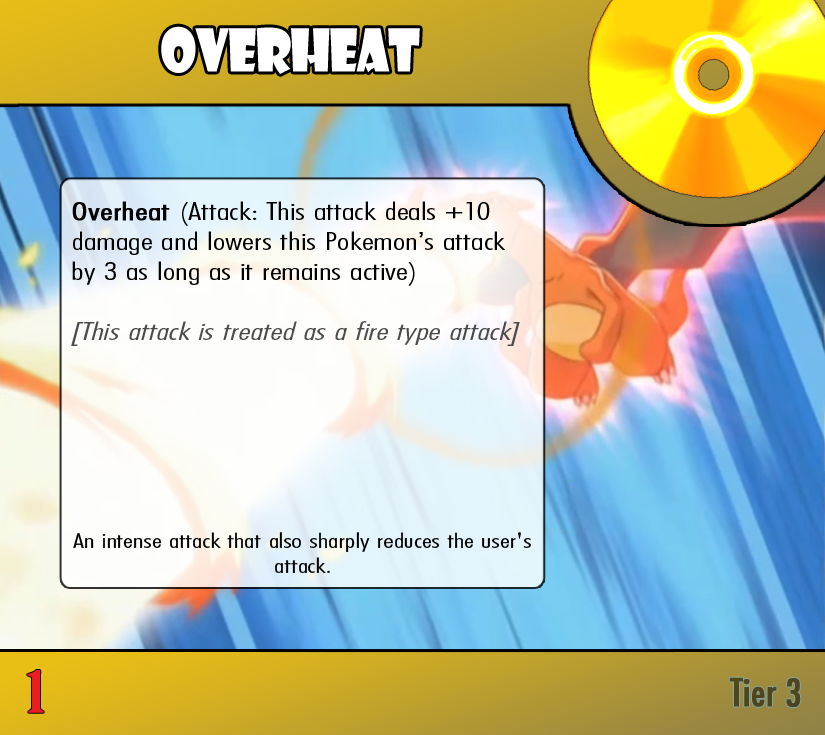
<style>
.page{position:relative;width:825px;height:735px}
.page>*{position:absolute;margin:0}
.t1{font:57.4px "ShowcardGothic-Reg";letter-spacing:-0.025em;color:#ffffff;scale:0.91 1}
.t2{font:25px "FuturaCondensedBQ-Light";color:#000000;scale:1.5 1}
.t3{font:25px "FuturaCondensedBQ-Light";color:#000000;font-weight:bold;scale:1.5 1}
.t4{font:25px "FuturaCondensedBQ-Light";color:#4c4b4b;font-style:italic;scale:1.5 1}
.t5{font:20.8px "FuturaCondensedBQ-Light";color:#000000;scale:1.5 1}
.t6{font:55.6px "BirchStd";color:#ed1c24;font-weight:bold;scale:1.5 1}
.t7{font:37.5px "Futura-Condensed-Normal";color:#4e451f;font-weight:bold}
</style>
<div class="page">
<p class="t1" style="left:161px;top:26px;width:259px;height:48px">Overheat</p>
<p class="t2" style="left:71px;top:201px;width:449px;height:145px"><span class="t3">Overheat </span>(Attack: This attack deals +10 damage and lowers this Pokemon’s attack by 3 as long as it remains active)<br><br><span class="t4">[This attack is treated as a fire type attack]</span></p>
<p class="t5" style="left:73px;top:532px;width:458px;height:41px;text-align:center">An intense attack that also sharply reduces the user's attack.</p>
<p class="t6" style="left:27px;top:670px;width:17px;height:43px">1</p>
<p class="t7" style="left:729px;top:677px;width:72px;height:30px">Tier 3</p>
</div>
